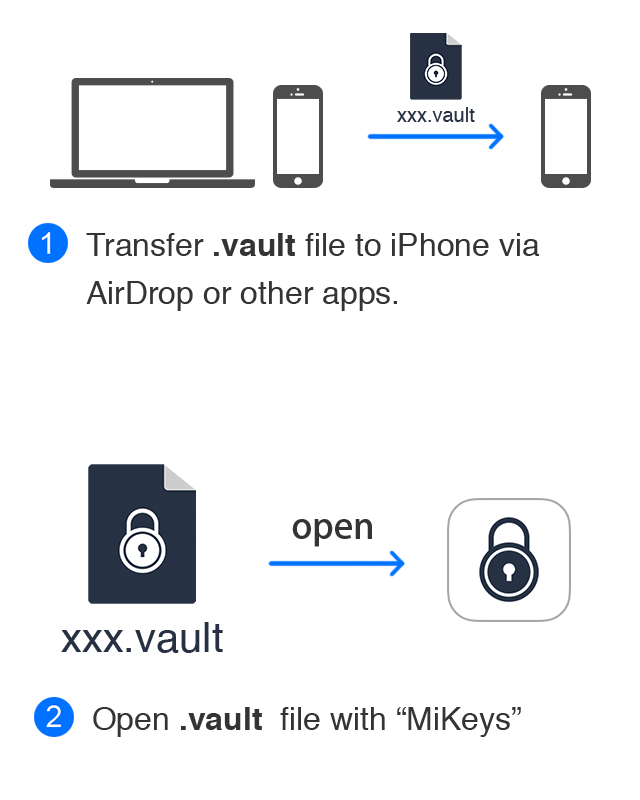
<style>
.page{position:relative;width:640px;height:800px;background:#ffffff}
.page>*{position:absolute;margin:0}
.t1{font:20px "Helvetica";color:#263143}
.t2{font:32px/48px "Helvetica";color:#343434}
.t3{font:32px/48px "Helvetica-Bold";color:#343434}
.t4{font:36px "AdobeHeitiStd-Regular";color:#343434}
.t5{font:41.6px "Helvetica";color:#273143}
.t6{font:32px "Helvetica";color:#343434}
.t7{font:32px "Helvetica-Bold";color:#343434}
</style>
<div class="page">
<p class="t1" style="left:397px;top:107px;width:78px;height:15px">xxx.vault</p>
<p class="t2" style="left:86px;top:233px;width:453px;height:78px">Transfer <span class="t3">.vault</span> file to iPhone via <br>AirDrop or other apps.</p>
<p class="t4" style="left:292px;top:519px;width:80px;height:28px">open</p>
<p class="t5" style="left:61px;top:622px;width:162px;height:31px">xxx.vault</p>
<p class="t6" style="left:93px;top:707px;width:428px;height:30px">Open <span class="t7">.vault </span> file with “MiKeys”</p>
</div>
